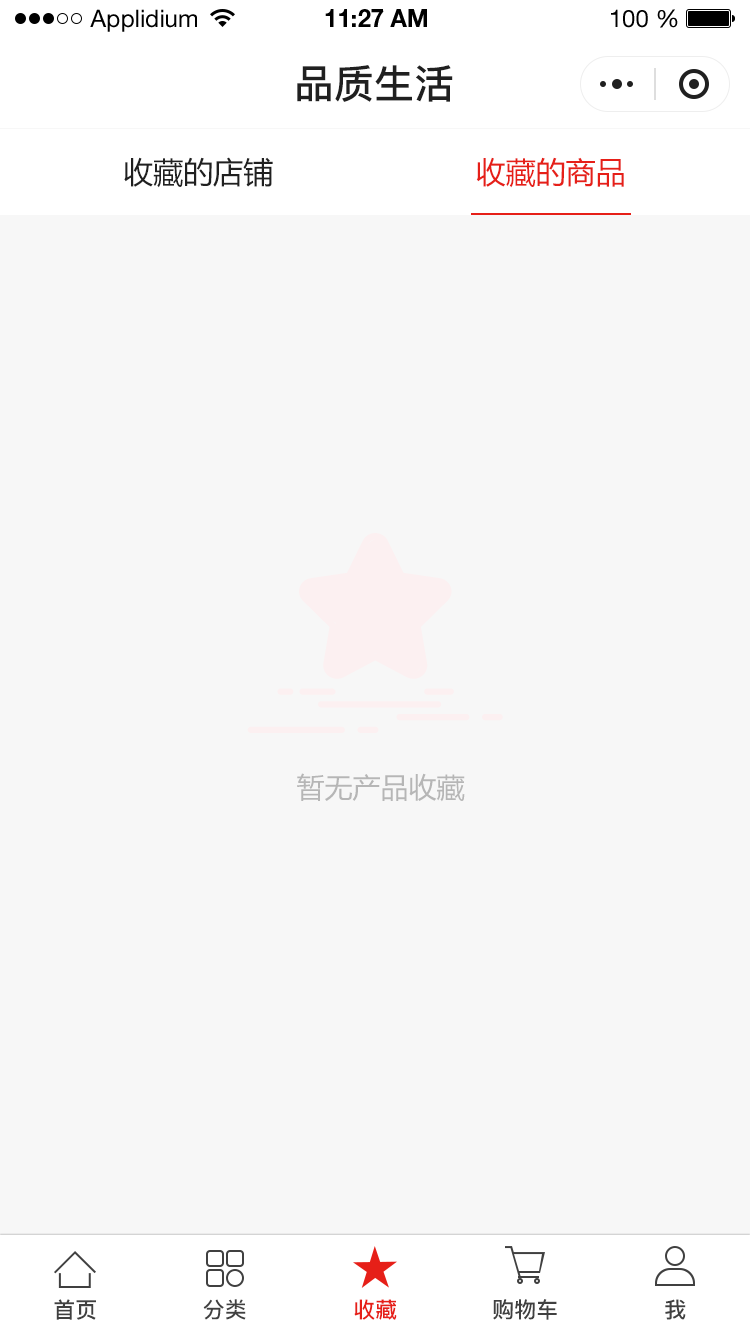
<style>
.page{position:relative;width:750px;height:1334px;background:#f7f7f7}
.page>*{position:absolute;margin:0}
.t1{font:24px "HelveticaNeueLTStd-Roman";color:#000000}
.t2{font:24px "HelveticaNeueLTStd-Bd";color:#000000}
.t3{font:40px "PingFang-SC-Bold";color:#202020;text-transform:uppercase}
.t4{font:30px "MicrosoftYaHei";color:#202020;text-transform:uppercase}
.t5{font:30px "MicrosoftYaHei";color:#e61f18;text-transform:uppercase}
.t6{font:28px "MicrosoftYaHei";color:#b6b6b6;text-transform:uppercase}
.t7{font:22px "PingFang-SC-Bold";color:#404040;text-transform:uppercase}
.t8{font:22px "PingFang-SC-Bold";color:#e61f18;text-transform:uppercase}
</style>
<div class="page">
<p class="t1" style="left:90px;top:9px;width:107px;height:23px">Applidium</p>
<p class="t2" style="left:325px;top:9px;width:102px;height:18px">11:27 AM</p>
<p class="t1" style="left:611px;top:9px;width:67px;height:19px">100 %</p>
<p class="t3" style="left:297px;top:65px;width:156px;height:37px">品质生活</p>
<p class="t4" style="left:124px;top:157px;width:149px;height:31px">收藏的店铺</p>
<p class="t5" style="left:476px;top:157px;width:148px;height:31px">收藏的商品</p>
<p class="t6" style="left:297px;top:773px;width:168px;height:29px">暂无产品收藏</p>
<p class="t7" style="left:54px;top:1299px;width:42px;height:21px">首页</p>
<p class="t7" style="left:203px;top:1299px;width:43px;height:21px">分类</p>
<p class="t8" style="left:354px;top:1299px;width:43px;height:21px">收藏</p>
<p class="t7" style="left:493px;top:1299px;width:64px;height:21px">购物车</p>
<p class="t7" style="left:665px;top:1299px;width:21px;height:21px">我</p>
</div>
